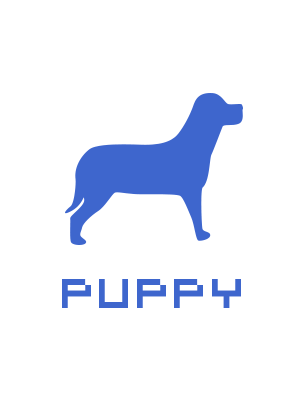
<style>
.page{position:relative;width:300px;height:400px;background:#ffffff}
.page>*{position:absolute;margin:0}
.t1{font:57.9px "VisitorTT1BRK";letter-spacing:0.05em;color:#3e66cd}
</style>
<div class="page">
<p class="t1" style="left:62px;top:279px;width:179px;height:29px">PUPPY</p>
</div>
